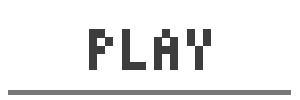
<style>
.page{position:relative;width:300px;height:100px;background:#ffffff}
.page>*{position:absolute;margin:0}
.t1{font:65px "Pixelated";color:#3d3d3d}
</style>
<div class="page">
<p class="t1" style="left:89px;top:29px;width:122px;height:41px">PLAY</p>
</div>
